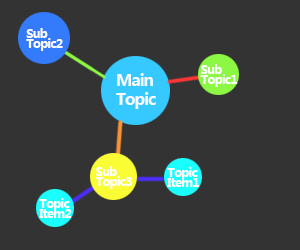
<style>
.page{position:relative;width:300px;height:250px;background:#333333}
.page>*{position:absolute;margin:0}
.t1{font:12px/10px "MicrosoftYaHei-Bold";letter-spacing:-0.06em;color:#ffffff}
.t2{font:16px/19px "MicrosoftYaHei-Bold";letter-spacing:-0.06em;color:#fefefe}
.t3{font:12px/10px "MicrosoftYaHei-Bold";letter-spacing:-0.06em;color:#fefefe}
</style>
<div class="page">
<p class="t1" style="left:26px;top:28px;width:37px;height:23px">Sub<br>Topic2</p>
<p class="t1" style="left:200px;top:64px;width:38px;height:23px">Sub <br>Topic1</p>
<p class="t2" style="left:116px;top:73px;width:40px;height:36px">Main<br>Topic</p>
<p class="t1" style="left:95px;top:166px;width:37px;height:23px">Sub<br>Topic3</p>
<p class="t3" style="left:167px;top:167px;width:33px;height:20px">Topic<br>Item1</p>
<p class="t3" style="left:39px;top:198px;width:32px;height:20px">Topic<br>Item2</p>
</div>
